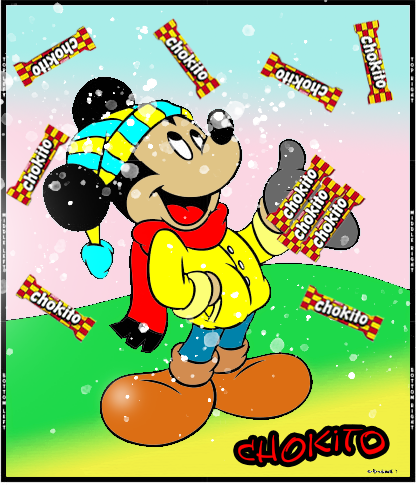
<style>
.page{position:relative;width:419px;height:485px}
.page>*{position:absolute;margin:0}
.t1{font:36px "AdAstra";color:#ff0000}
</style>
<div class="page">
<p class="t1" style="left:238px;top:429px;width:147px;height:34px">Chokito</p>
</div>
